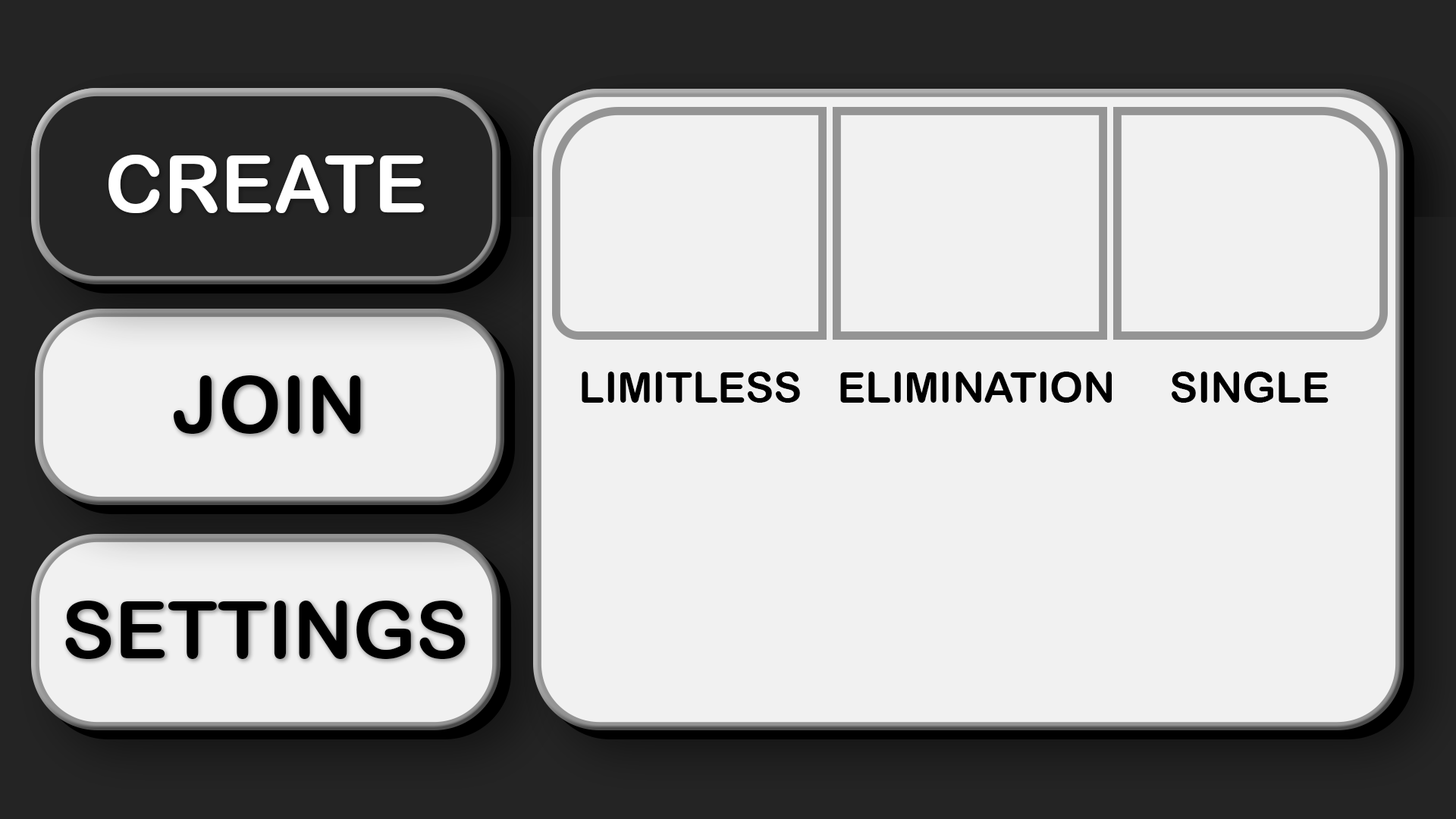
<style>
.page{position:relative;width:1456px;height:819px;background:#f1f1f1}
.page>*{position:absolute;margin:0}
.t1{font:79.6px "ArialRoundedMTBold";color:#ffffff}
.t2{font:79.6px "ArialRoundedMTBold";color:#000000}
.t3{font:42.1px "ArialRoundedMTBold";color:#000000}
</style>
<div class="page">
<p class="t1" style="left:108px;top:155px;width:317px;height:58px">CREATE</p>
<p class="t1" style="left:108px;top:155px;width:317px;height:58px">CREATE</p>
<p class="t2" style="left:174px;top:375px;width:187px;height:59px">JOIN</p>
<p class="t2" style="left:174px;top:375px;width:187px;height:59px">JOIN</p>
<p class="t3" style="left:582px;top:372px;width:218px;height:31px">LIMITLESS</p>
<p class="t3" style="left:840px;top:372px;width:272px;height:31px">ELIMINATION</p>
<p class="t3" style="left:1172px;top:372px;width:157px;height:31px">SINGLE</p>
<p class="t2" style="left:65px;top:601px;width:401px;height:58px">SETTINGS</p>
<p class="t2" style="left:65px;top:601px;width:401px;height:58px">SETTINGS</p>
</div>
